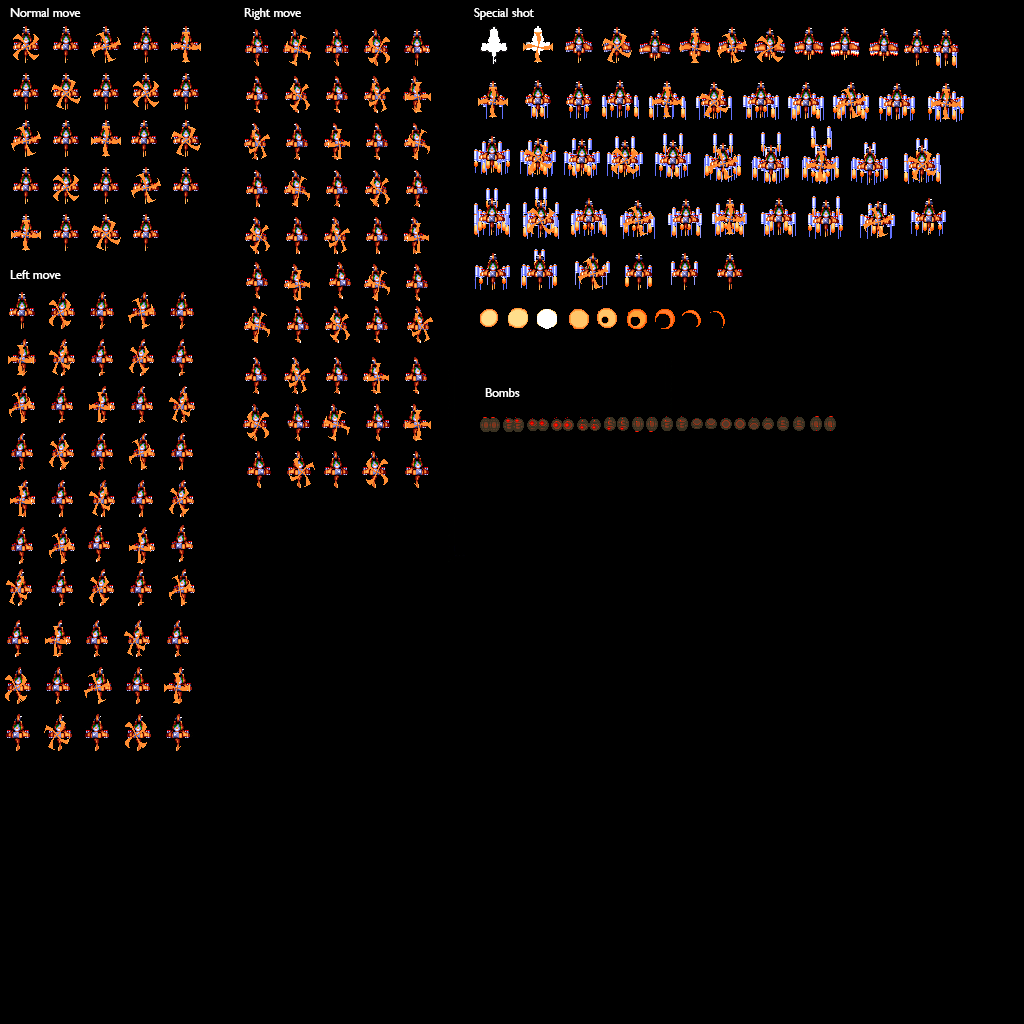
<style>
.page{position:relative;width:1024px;height:1024px;background:#000000}
.page>*{position:absolute;margin:0}
.t1{font:12.5px "GillSansMT";color:#ffffff}
</style>
<div class="page">
<p class="t1" style="left:10px;top:8px;width:71px;height:9px">Normal move</p>
<p class="t1" style="left:244px;top:8px;width:57px;height:12px">Right move</p>
<p class="t1" style="left:474px;top:8px;width:60px;height:12px">Special shot</p>
<p class="t1" style="left:10px;top:270px;width:51px;height:9px">Left move</p>
<p class="t1" style="left:485px;top:388px;width:35px;height:9px">Bombs</p>
</div>
